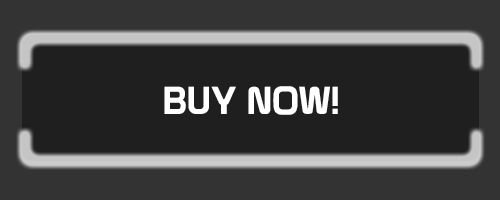
<style>
.page{position:relative;width:500px;height:200px;background:#1f1f1f}
.page>*{position:absolute;margin:0}
.t1{font:38px "Prototype";color:#ffffff}
</style>
<div class="page">
<p class="t1" style="left:164px;top:86px;width:174px;height:29px">BUY NOW!</p>
</div>
